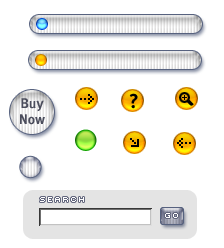
<style>
.page{position:relative;width:224px;height:248px;background:#ffffff}
.page>*{position:absolute;margin:0}
.t1{font:14px/16px "Meta-Bold";color:#4b4d5c}
.t2{font:7px "Mini";letter-spacing:0.15em;color:#ffffff}
</style>
<div class="page">
<p class="t1" style="left:20px;top:98px;width:25px;height:27px;text-align:center">Buy<br>Now</p>
<p class="t2" style="left:40px;top:197px;width:44px;height:5px">SEARCH</p>
<p class="t2" style="left:165px;top:213px;width:13px;height:5px">GO</p>
</div>
